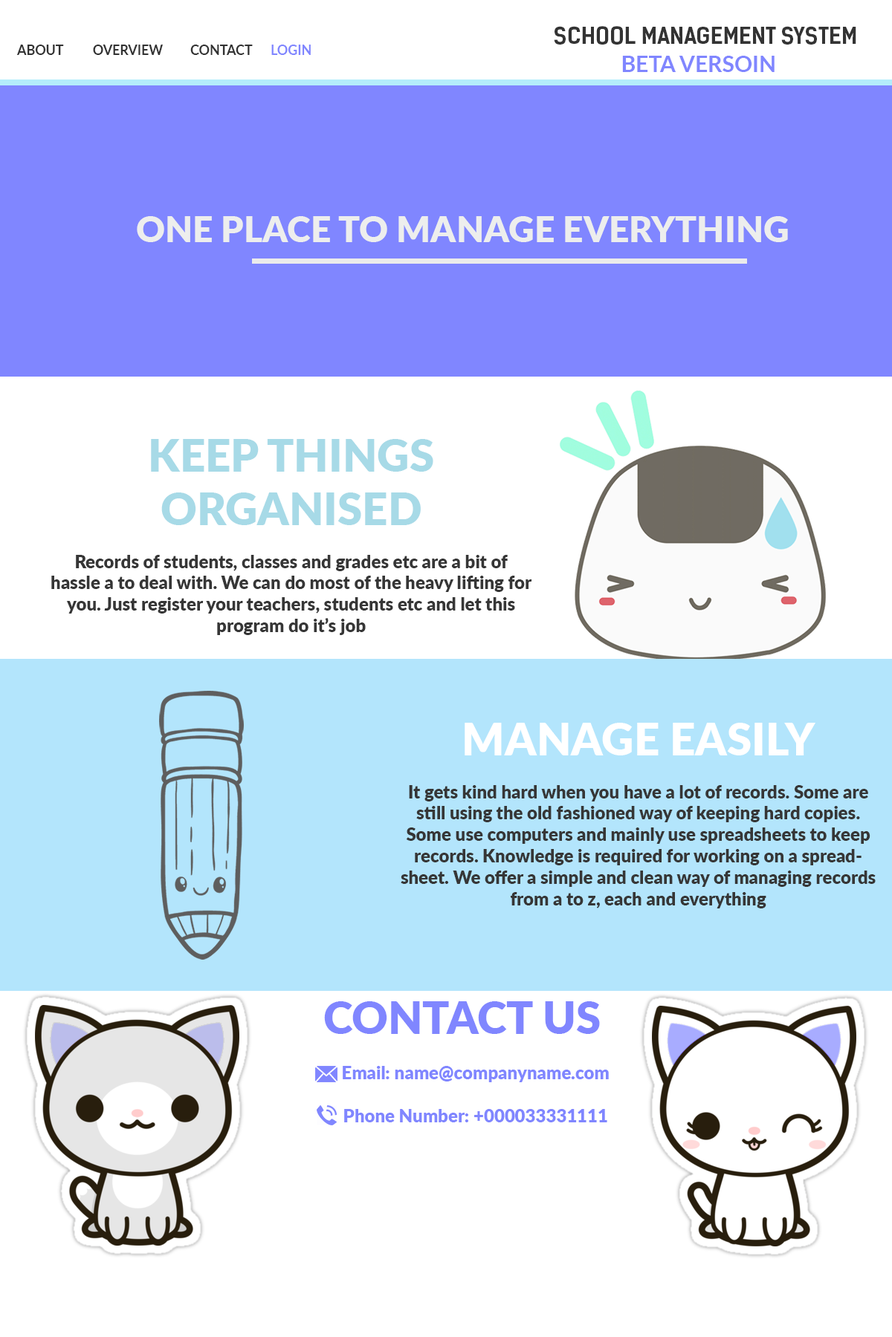
<style>
.page{position:relative;width:892px;height:1337px;background:#ffffff}
.page>*{position:absolute;margin:0}
.t1{font:22.3px "KelsonSans-Bold";color:#333333}
.t2{font:13.2px "Lato-Bold";color:#333333}
.t3{font:13.2px "Lato-Bold";color:#8086ff}
.t4{font:22.3px "Lato-Bold";color:#8086ff}
.t5{font:35.7px "Lato-Black";color:#edeeed}
.t6{font:17.8px "Lato-Black";color:#363636}
.t7{font:44.6px "Lato-Black";color:#a6d3e8}
.t8{font:44.6px "Lato-Black";color:#ffffff}
.t9{font:44.6px "Lato-Black";color:#8086ff}
.t10{font:17.8px "Lato-Black";color:#8086ff}
</style>
<div class="page">
<p class="t1" style="left:554px;top:26px;width:302px;height:19px">SCHOOL MANAGEMENT SYSTEM</p>
<p class="t2" style="left:16px;top:45px;width:48px;height:10px">ABOUT</p>
<p class="t2" style="left:93px;top:45px;width:70px;height:10px">OVERVIEW</p>
<p class="t2" style="left:190px;top:45px;width:63px;height:10px">CONTACT</p>
<p class="t3" style="left:271px;top:45px;width:40px;height:10px">LOGIN</p>
<p class="t4" style="left:622px;top:56px;width:152px;height:16px">BETA VERSOIN</p>
<p class="t5" style="left:137px;top:216px;width:651px;height:26px">ONE PLACE TO MANAGE EVERYTHING</p>
<p class="t6" style="left:51px;top:439px;width:481px;height:196px;text-align:center"><span class="t7">KEEP THINGS <br>ORGANISED<br><br></span>Records of students, classes and grades etc are a bit of hassle a to deal with. We can do most of the heavy lifting for you. Just register your teachers, students etc and let this <br>program do it’s job</p>
<p class="t6" style="left:400px;top:723px;width:475px;height:186px;text-align:center"><span class="t8">MANAGE EASILY<br><br></span>It gets kind hard when you have a lot of records. Some are still using the old fashioned way of keeping hard copies. Some use computers and mainly use spreadsheets to keep records. Knowledge is required for working on a spreadsheet. We offer a simple and clean way of managing records from a to z, each and everything</p>
<p class="t9" style="left:324px;top:1002px;width:276px;height:32px">CONTACT US</p>
<p class="t10" style="left:343px;top:1066px;width:266px;height:17px">Email: name@companyname.com</p>
<p class="t10" style="left:344px;top:1109px;width:263px;height:14px">Phone Number: +000033331111</p>
</div>
